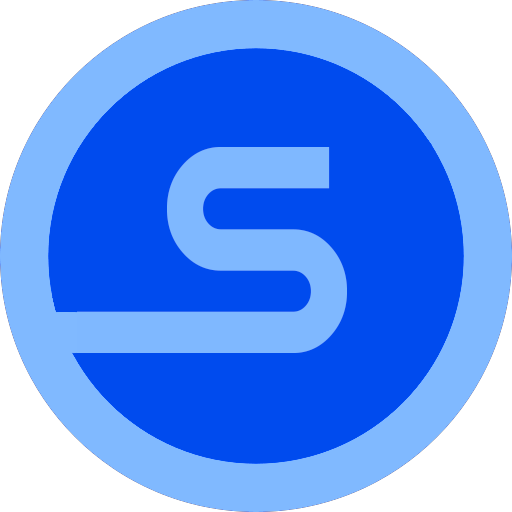
<style>
.page{position:relative;width:512px;height:512px;background:#004bee}
.page>*{position:absolute;margin:0}
.t1{font:329.6px "GameOfSquids";color:#7fb8ff;scale:0.87 1}
</style>
<div class="page">
<p class="t1" style="left:77px;top:147px;width:270px;height:206px">S</p>
</div>
